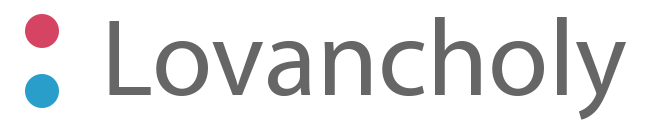
<style>
.page{position:relative;width:648px;height:126px;background:#ffffff}
.page>*{position:absolute;margin:0}
.t1{font:110px "MyriadPro-Regular";color:#666666}
</style>
<div class="page">
<p class="t1" style="left:109px;top:17px;width:517px;height:103px">Lovancholy</p>
</div>
